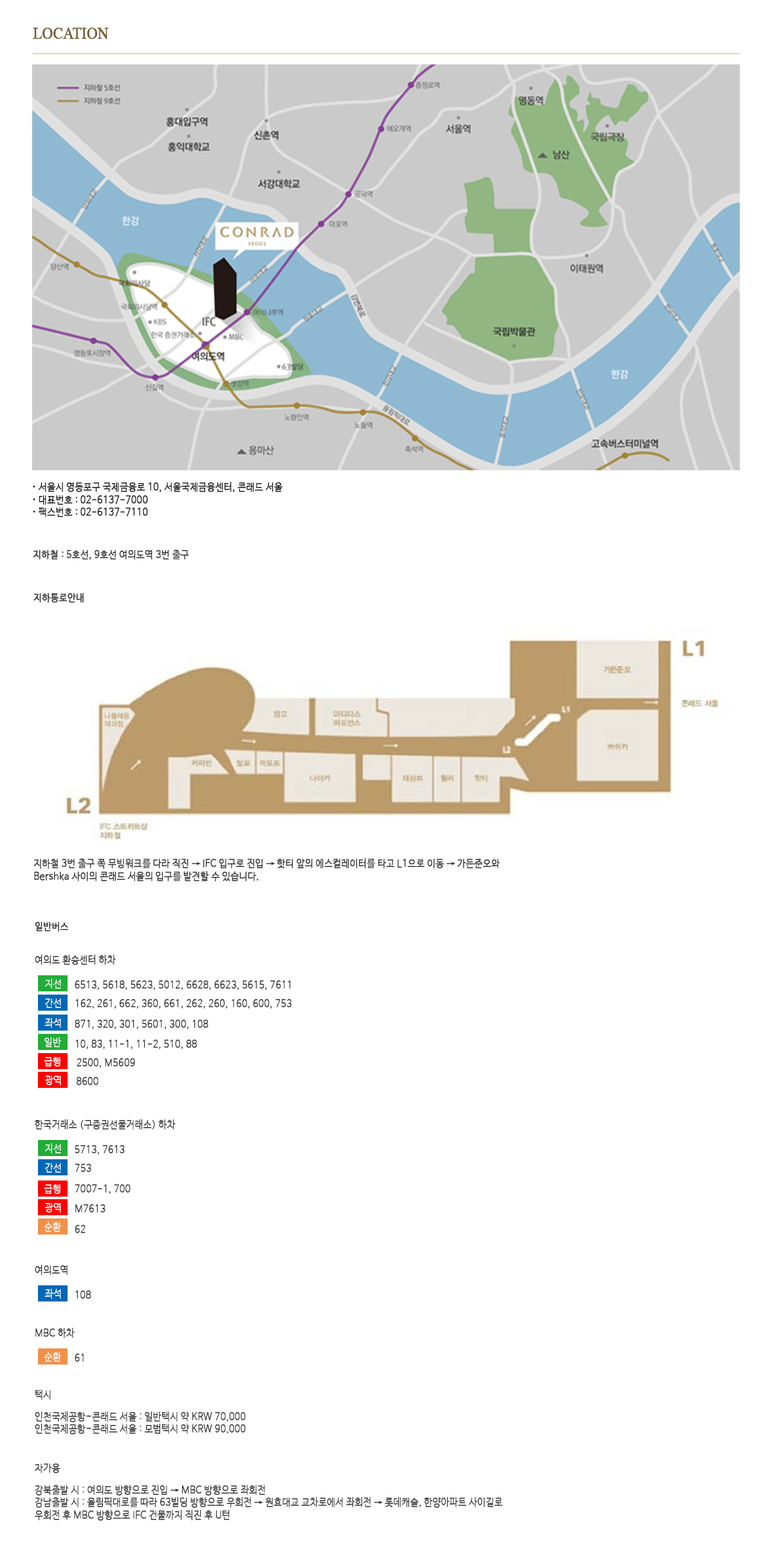
<style>
.page{position:relative;width:772px;height:1544px;background:#ffffff}
.page>*{position:absolute;margin:0}
.t1{font:16.1px "TimesNewRomanPSMT";color:#785f37;font-weight:bold;scale:0.9 1}
.t2{font:10.3px "NanumBarunGothicLight";color:#1a1a1a;font-weight:bold;scale:0.9 1}
.t3{font:10.3px "NanumBarunGothicBold";color:#1a1a1a;font-weight:bold;scale:0.9 1}
.t4{font:10.3px "NanumBarunGothicLight";color:#333333;font-weight:bold;scale:0.9 1}
.t5{font:10.3px "NanumBarunGothic";color:#333333;font-weight:bold;scale:0.9 1}
.t6{font:10.4px "NanumBarunGothic";color:#333333;font-weight:bold;scale:0.89 1}
.t7{font:10.4px "NanumBarunGothicUltraLight";color:#333333;font-weight:bold;scale:0.89 1}
.t8{font:10.3px "NanumBarunGothicUltraLight";color:#fafafa;font-weight:bold;scale:0.9 1}
.t9{font:10.3px "NanumBarunGothicUltraLight";color:#333333;font-weight:bold;scale:0.9 1}
</style>
<div class="page">
<p class="t1" style="left:33px;top:28px;width:76px;height:11px">LOCATION</p>
<p class="t2" style="left:33px;top:482px;width:249px;height:35px"><span class="t3">·</span> 서울시 영등포구 국제금융로 10, 서울국제금융센터, 콘래드 서울<br><span class="t3">· </span>대표번호 : 02-6137-7000<br><span class="t3">·</span> 팩스번호 : 02-6137-7110</p>
<p class="t4" style="left:33px;top:550px;width:156px;height:10px"><span class="t5">지하철</span> : 5호선, 9호선 여의도역 3번 출구</p>
<p class="t5" style="left:33px;top:593px;width:51px;height:10px">지하통로안내</p>
<p class="t4" style="left:33px;top:858px;width:467px;height:24px">지하철 3번 출구 쪽 무빙워크를 다라 직진 → IFC 입구로 진입 → 핫티 앞의 에스컬레이터를 타고 L1으로 이동 → 가든준오와<br>Bershka 사이의 콘래드 서울의 입구를 발견할 수 있습니다.</p>
<p class="t6" style="left:35px;top:922px;width:34px;height:10px">일반버스</p>
<p class="t7" style="left:35px;top:955px;width:81px;height:10px">여의도 환승센터 하차</p>
<p class="t8" style="left:45px;top:979px;width:16px;height:10px">지선</p>
<p class="t9" style="left:75px;top:981px;width:216px;height:9px">6513, 5618, 5623, 5012, 6628, 6623, 5615, 7611</p>
<p class="t8" style="left:45px;top:999px;width:16px;height:9px">간선</p>
<p class="t9" style="left:75px;top:999px;width:216px;height:10px">162, 261, 662, 360, 661, 262, 260, 160, 600, 753</p>
<p class="t8" style="left:44px;top:1018px;width:17px;height:10px">좌석</p>
<p class="t9" style="left:75px;top:1020px;width:133px;height:10px">871, 320, 301, 5601, 300, 108</p>
<p class="t8" style="left:44px;top:1037px;width:17px;height:11px">일반</p>
<p class="t9" style="left:75px;top:1040px;width:122px;height:9px">10, 83, 11-1, 11-2, 510, 88</p>
<p class="t8" style="left:44px;top:1057px;width:16px;height:10px">급행</p>
<p class="t7" style="left:77px;top:1058px;width:58px;height:10px">2500, M5609</p>
<p class="t8" style="left:44px;top:1076px;width:17px;height:10px">광역</p>
<p class="t9" style="left:77px;top:1077px;width:21px;height:9px">8600</p>
<p class="t7" style="left:35px;top:1120px;width:141px;height:10px">한국거래소 (구증권선물거래소) 하차</p>
<p class="t8" style="left:45px;top:1143px;width:16px;height:11px">지선</p>
<p class="t9" style="left:75px;top:1145px;width:50px;height:10px">5713, 7613</p>
<p class="t8" style="left:45px;top:1163px;width:16px;height:10px">간선</p>
<p class="t9" style="left:75px;top:1164px;width:16px;height:8px">753</p>
<p class="t8" style="left:44px;top:1185px;width:16px;height:9px">급행</p>
<p class="t9" style="left:75px;top:1185px;width:56px;height:9px">7007-1, 700</p>
<p class="t8" style="left:44px;top:1203px;width:17px;height:10px">광역</p>
<p class="t9" style="left:75px;top:1205px;width:31px;height:8px">M7613</p>
<p class="t8" style="left:44px;top:1222px;width:17px;height:10px">순환</p>
<p class="t9" style="left:75px;top:1225px;width:11px;height:9px">62</p>
<p class="t7" style="left:35px;top:1265px;width:33px;height:10px">여의도역</p>
<p class="t8" style="left:44px;top:1289px;width:17px;height:10px">좌석</p>
<p class="t9" style="left:75px;top:1291px;width:16px;height:8px">108</p>
<p class="t7" style="left:35px;top:1328px;width:40px;height:10px">MBC 하차</p>
<p class="t8" style="left:44px;top:1352px;width:17px;height:10px">순환</p>
<p class="t9" style="left:75px;top:1354px;width:9px;height:8px">61</p>
<p class="t7" style="left:35px;top:1390px;width:16px;height:10px">택시</p>
<p class="t7" style="left:35px;top:1412px;width:211px;height:23px">인천국제공항~콘래드 서울 : 일반택시 약 KRW 70,000<br>인천국제공항~콘래드 서울 : 모범택시 약 KRW 90,000</p>
<p class="t7" style="left:35px;top:1464px;width:25px;height:10px">자가용</p>
<p class="t7" style="left:35px;top:1485px;width:468px;height:36px">강북출발 시 : 여의도 방향으로 진입 → MBC 방향으로 좌회전<br>강남출발 시 : 올림픽대로를 따라 63빌딩 방향으로 우회전 → 원효대교 교차로에서 좌회전 → 롯데캐슬, 한양아파트 사이길로<br>우회전 후 MBC 방향으로 IFC 건물까지 직진 후 U턴</p>
</div>
